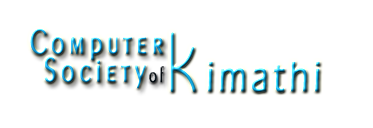
<style>
.page{position:relative;width:373px;height:128px;background:#ffffff}
.page>*{position:absolute;margin:0}
.t1{font:36px "Exotic350BT-Light";letter-spacing:0.16em;font-weight:bold;scale:0.75 1}
.t2{font:43.2px "ErasITCbyBT-Book";letter-spacing:0.16em;font-weight:bold;scale:0.75 1}
.t3{font:86.4px "CircleD";letter-spacing:0.16em;font-weight:bold;scale:0.75 1}
.t4{font:21.6px "Exotic350BT-Light";letter-spacing:0.16em;color:#01090f;font-weight:bold;scale:0.75 1}
</style>
<div class="page">
<p class="t1" style="left:30px;top:28px;width:133px;height:33px">Computer</p>
<p class="t2" style="left:170px;top:32px;width:150px;height:61px"><span class="t3">k</span>imathi</p>
<p class="t1" style="left:44px;top:56px;width:102px;height:33px">Society</p>
<p class="t4" style="left:149px;top:66px;width:15px;height:17px">of</p>
</div>
